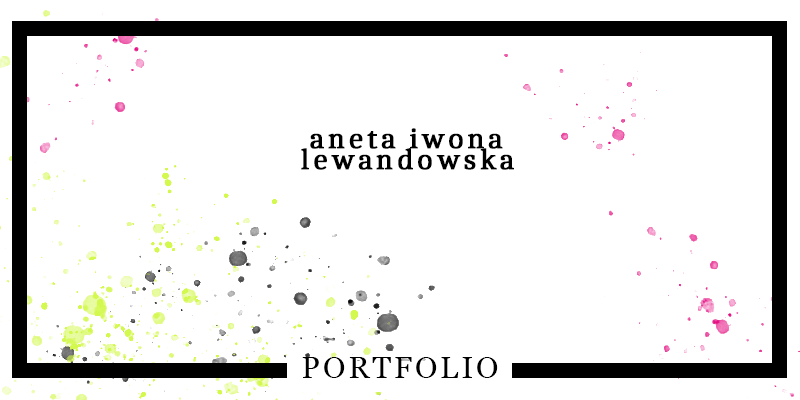
<style>
.page{position:relative;width:800px;height:400px;background:#ffffff}
.page>*{position:absolute;margin:0}
.t1{font:30px "Caladea-Regular";letter-spacing:0.1em;color:#000000;font-weight:bold}
.t2{font:30px "Georgia";letter-spacing:0.1em;color:#000000}
</style>
<div class="page">
<p class="t1" style="left:310px;top:128px;width:193px;height:21px">aneta iwona</p>
<p class="t1" style="left:301px;top:148px;width:213px;height:22px">lewandowska</p>
<p class="t2" style="left:302px;top:357px;width:196px;height:21px">PORTFOLIO</p>
</div>
